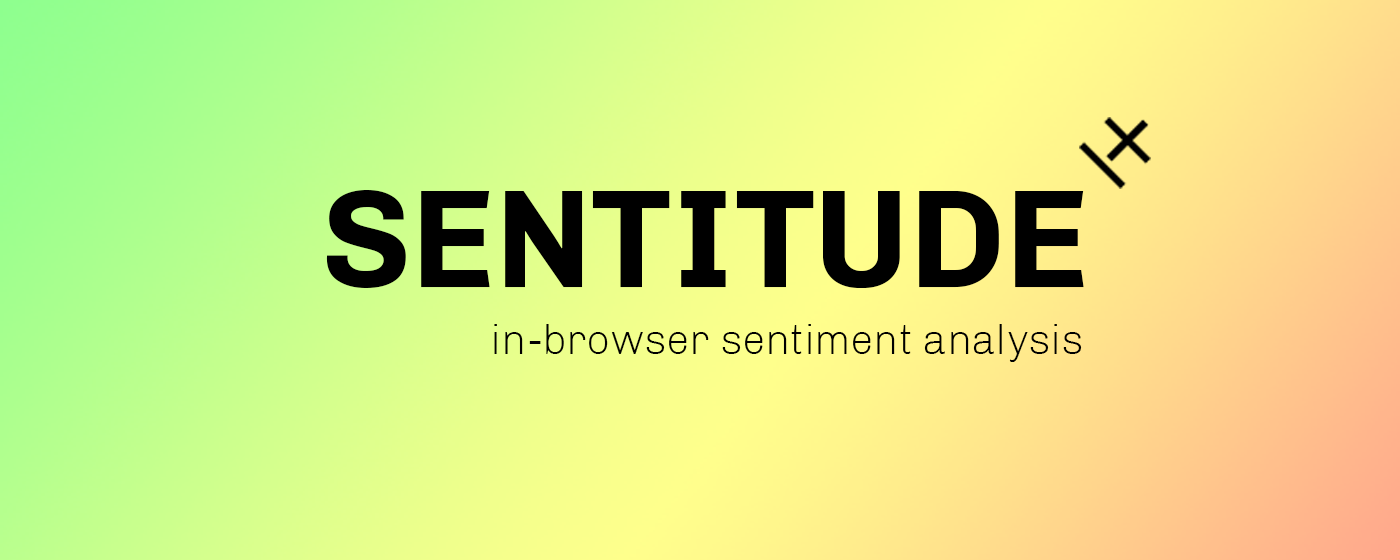
<style>
.page{position:relative;width:1400px;height:560px}
.page>*{position:absolute;margin:0}
.t1{font:140.8px "Chivo-Bold";color:#000000}
.t2{font:41.5px "Chivo-Light";color:#000000}
</style>
<div class="page">
<p class="t1" style="left:326px;top:190px;width:758px;height:98px">SENTITUDE</p>
<p class="t2" style="left:494px;top:324px;width:588px;height:38px">in-browser sentiment analysis</p>
</div>
